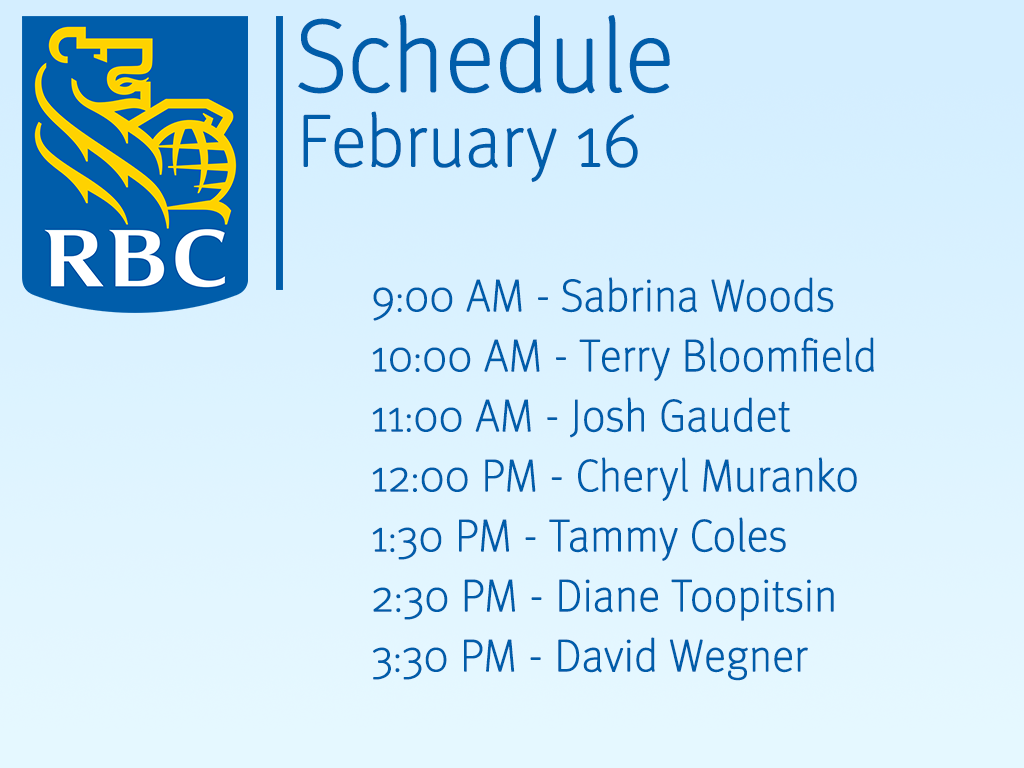
<style>
.page{position:relative;width:1024px;height:768px}
.page>*{position:absolute;margin:0}
.t1{font:102px "MetaPro-Thin";color:#005daa;font-weight:bold}
.t2{font:73px "MetaPro-Thin";color:#005daa;font-weight:bold}
.t3{font:45px/60px "MetaPro-Thin";color:#005daa;font-weight:bold}
</style>
<div class="page">
<p class="t1" style="left:298px;top:14px;width:372px;height:80px">Schedule</p>
<p class="t2" style="left:303px;top:111px;width:335px;height:72px">February 16</p>
<p class="t3" style="left:372px;top:277px;width:502px;height:404px">9:00 AM - Sabrina Woods<br>10:00 AM - Terry Bloomfield<br>11:00 AM - Josh Gaudet<br>12:00 PM - Cheryl Muranko<br>1:30 PM - Tammy Coles<br>2:30 PM - Diane Toopitsin<br>3:30 PM - David Wegner</p>
</div>
